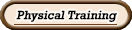
<style>
.page{position:relative;width:132px;height:30px;background:#f6e6d5}
.page>*{position:absolute;margin:0}
.t1{font:12px "Rockwell";color:#000000;font-weight:bold;font-style:italic}
</style>
<div class="page">
<p class="t1" style="left:16px;top:10px;width:101px;height:13px">Physical Training</p>
</div>
